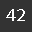
<style>
.page{position:relative;width:32px;height:32px;background:#333333}
.page>*{position:absolute;margin:0}
.t1{font:17.8px "MyriadPro-Regular";color:#ffffff;scale:1.12 1}
</style>
<div class="page">
<p class="t1" style="left:6px;top:9px;width:19px;height:12px">42</p>
</div>
